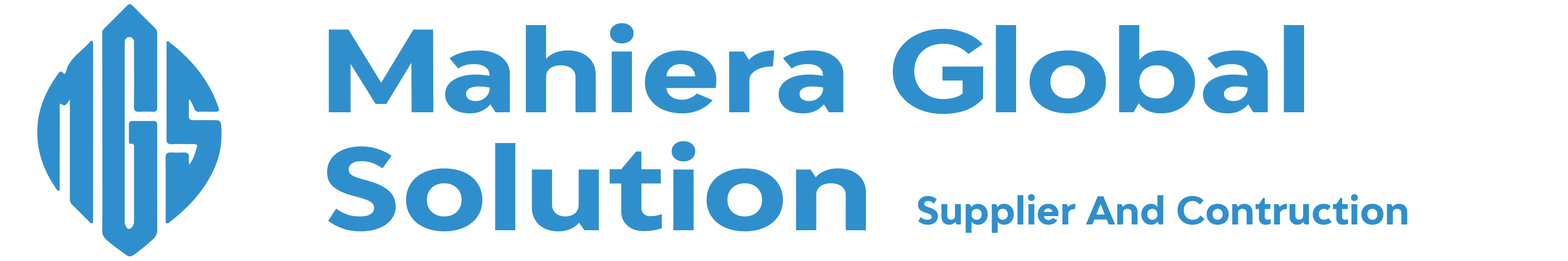
<style>
.page{position:relative;width:1568px;height:261px;background:#ffffff}
.page>*{position:absolute;margin:0}
.t1{font:111.9px "Adlinnaka-BoldDemo";color:#2f8fcd;scale:1.16 1}
.t2{font:37.6px "Adlinnaka-BoldDemo";color:#2f8fcd}
</style>
<div class="page">
<p class="t1" style="left:329px;top:23px;width:975px;height:91px">Mahiera Global</p>
<p class="t1" style="left:327px;top:141px;width:539px;height:91px">Solution</p>
<p class="t2" style="left:918px;top:194px;width:490px;height:39px">Supplier And Contruction</p>
</div>
